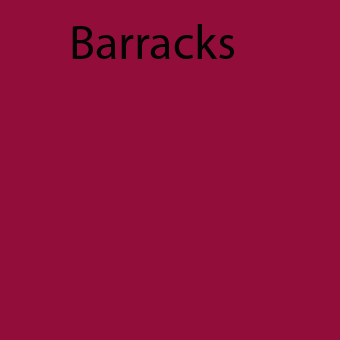
<style>
.page{position:relative;width:340px;height:340px;background:#930d3b}
.page>*{position:absolute;margin:0}
.t1{font:48px "MyriadPro-Regular";color:#040404}
</style>
<div class="page">
<p class="t1" style="left:72px;top:24px;width:162px;height:35px">Barracks</p>
</div>
